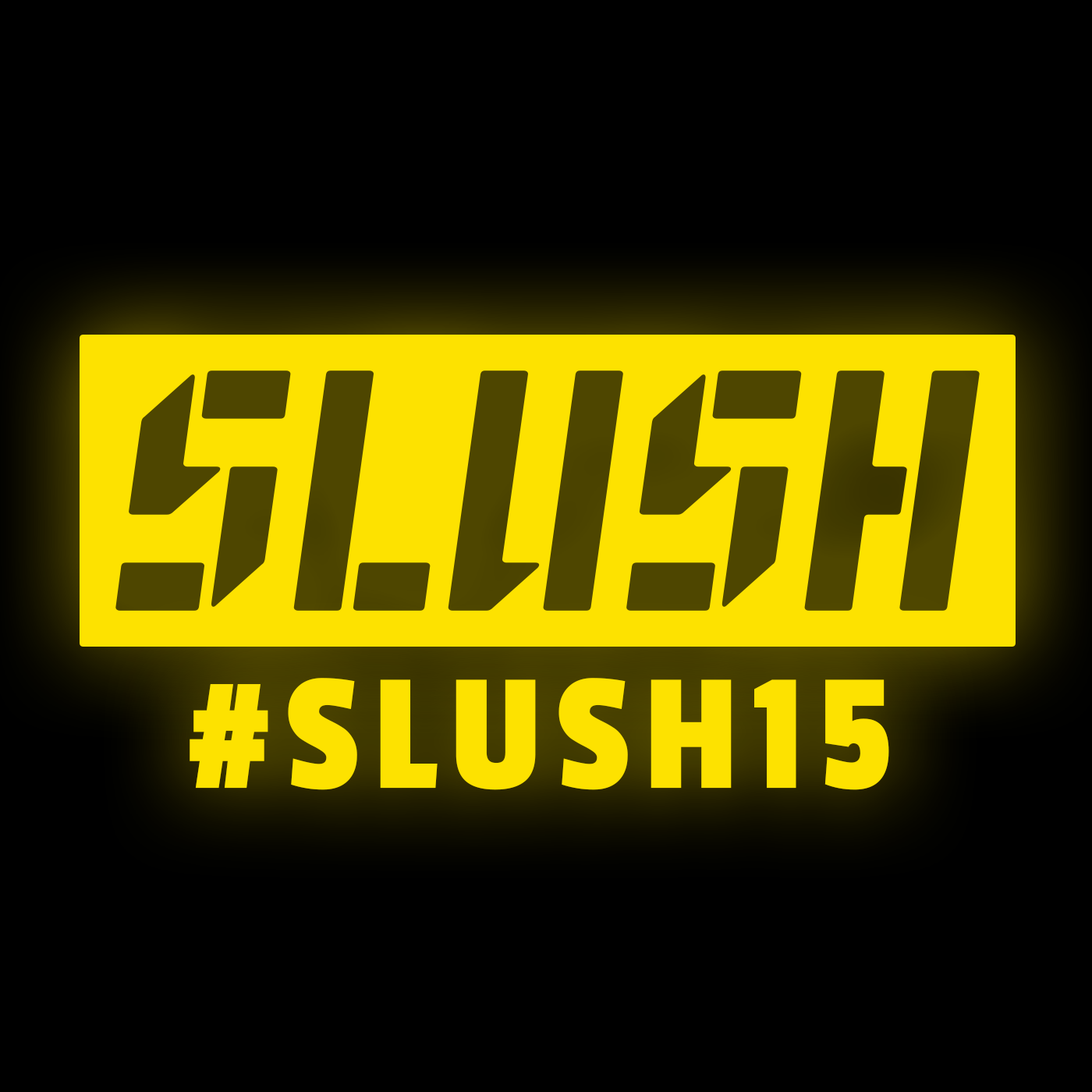
<style>
.page{position:relative;width:1092px;height:1092px;background:#000000}
.page>*{position:absolute;margin:0}
.t1{font:173.9px "PassionOne-Regular";letter-spacing:0.075em;color:#fde200}
</style>
<div class="page">
<p class="t1" style="left:190px;top:678px;width:699px;height:112px">#SLUSH15</p>
</div>
